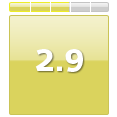
<style>
.page{position:relative;width:117px;height:117px;background:#dad35d}
.page>*{position:absolute;margin:0}
.t1{font:36px "Colaborate-Bold";color:#ffffff;text-transform:uppercase}
</style>
<div class="page">
<p class="t1" style="left:35px;top:49px;width:48px;height:23px">2.9</p>
</div>
